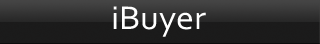
<style>
.page{position:relative;width:320px;height:44px;background:#1b1b1b}
.page>*{position:absolute;margin:0}
.t1{font:34.2px "Corbel";letter-spacing:-0.005em;color:#ffffff;scale:1.05 1}
</style>
<div class="page">
<p class="t1" style="left:113px;top:6px;width:93px;height:31px">iBuyer</p>
</div>
